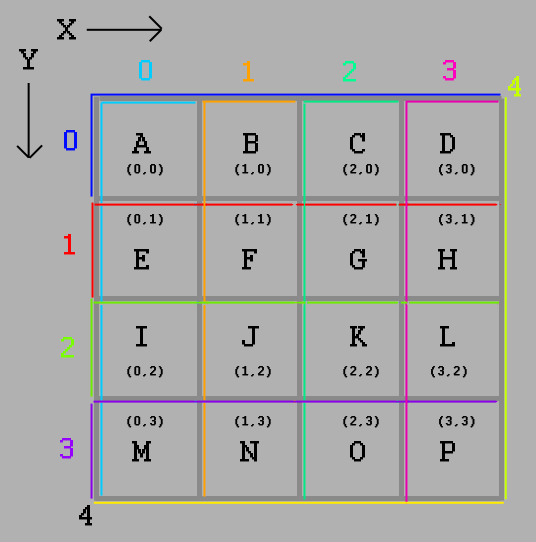
<style>
.page{position:relative;width:536px;height:542px;background:#b1b1b1}
.page>*{position:absolute;margin:0}
.t1{font:32.1px "Courier";color:#00ccff;font-weight:bold}
.t2{font:32.1px "Courier";color:#ffa200;font-weight:bold}
.t3{font:32.1px "Courier";color:#00ff91;font-weight:bold}
.t4{font:32.1px "Courier";color:#ff00be;font-weight:bold}
.t5{font:32.1px "Courier";color:#c6ff00;font-weight:bold}
.t6{font:32.1px "Courier";color:#000cff;font-weight:bold}
.t7{font:32.1px "Courier";color:#000000;font-weight:bold}
.t8{font:14px "Courier";color:#000000;font-weight:bold}
.t9{font:32.1px "Courier";color:#ff0000;font-weight:bold}
.t10{font:32.1px "Courier";color:#78ff00;font-weight:bold}
.t11{font:32.1px "Courier";color:#9600ff;font-weight:bold}
</style>
<div class="page">
<p class="t1" style="left:139px;top:60px;width:13px;height:21px">0</p>
<p class="t2" style="left:243px;top:61px;width:11px;height:21px">1</p>
<p class="t3" style="left:343px;top:61px;width:13px;height:21px">2</p>
<p class="t4" style="left:443px;top:60px;width:13px;height:21px">3</p>
<p class="t5" style="left:508px;top:76px;width:13px;height:21px">4</p>
<p class="t6" style="left:64px;top:130px;width:13px;height:21px">0</p>
<p class="t7" style="left:132px;top:133px;width:325px;height:329px">A     B    C   D<br><br><br>E   F    G   H<br><br>I   J   K   L<br><br><br>M   N   O   P</p>
<p class="t8" style="left:127px;top:164px;width:348px;height:264px">(0,0)  (1,0)  (2,0)    (3,0)<br><br><br>(0,1)  (1,1)  (2,1)    (3,1)<br><br><br><br><br><br><br><br><br>(0,2)  (1,2)  (2,2)   (3,2)<br><br><br>(0,3)  (1,3)  (2,3)    (3,3)</p>
<p class="t9" style="left:64px;top:234px;width:11px;height:21px">1</p>
<p class="t10" style="left:61px;top:337px;width:13px;height:21px">2</p>
<p class="t11" style="left:60px;top:438px;width:13px;height:21px">3</p>
<p class="t7" style="left:79px;top:505px;width:13px;height:21px">4</p>
</div>
